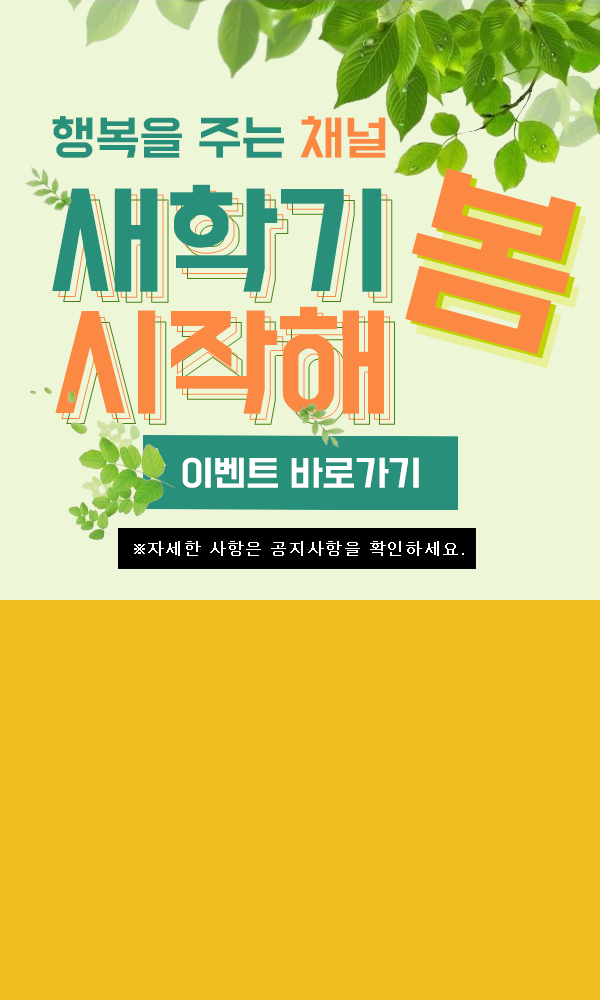
<style>
.page{position:relative;width:600px;height:1000px;background:#f2bd21}
.page>*{position:absolute;margin:0}
.t1{font:42.4px/122px "BMDoHyeon";letter-spacing:-0.025em;color:#288f7a;scale:1.11 1}
.t2{font:42.4px/122px "BMDoHyeon";letter-spacing:-0.025em;color:#fb8943;scale:1.11 1}
.t3{font:109px/122px "BMDoHyeon";letter-spacing:-0.025em;color:#288f7a;scale:1.11 1}
.t4{font:109px/122px "BMDoHyeon";letter-spacing:-0.025em;color:#fb8943;scale:1.11 1}
.t5{font:164.8px "BMDoHyeon";letter-spacing:-0.025em;color:#fb8943;scale:1.11 1}
.t6{font:31.6px "BMDoHyeon";letter-spacing:-0.025em;color:#ffffff;scale:1.11 1}
.t7{font:16px "Dotum";color:#ffffff;font-weight:bold}
</style>
<div class="page">
<p class="t1" style="left:52px;top:116px;width:334px;height:298px;text-align:center">행복을 주는 <span class="t2">채널<br></span><span class="t3">새학기<br></span><span class="t4">시작해</span></p>
<p class="t5" style="left:405px;top:168px;width:172px;height:187px;rotate:15deg">봄</p>
<p class="t6" style="left:182px;top:457px;width:237px;height:31px">이벤트 바로가기</p>
<p class="t7" style="left:134px;top:541px;width:330px;height:15px">※자세한 사항은 공지사항을 확인하세요.</p>
</div>
